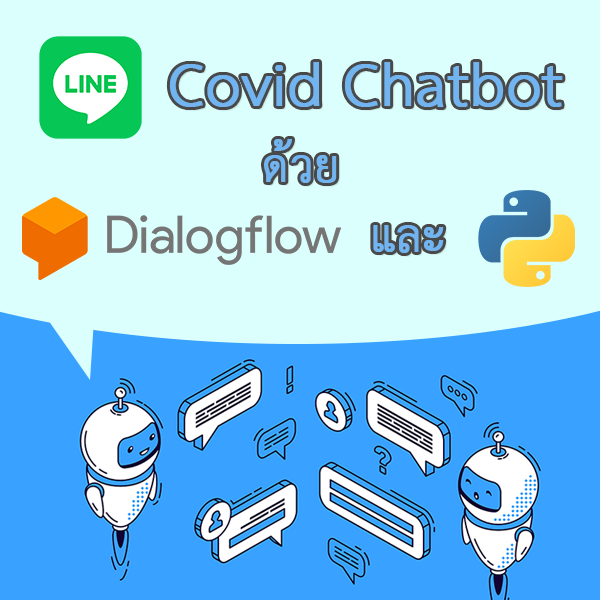
<style>
.page{position:relative;width:600px;height:600px;background:#dafffc}
.page>*{position:absolute;margin:0}
.t1{font:84.7px "THSarabunNew";color:#72b4f0;font-weight:bold}
.t2{font:63.5px "THSarabunNew";color:#72b4f0;font-weight:bold}
</style>
<div class="page">
<p class="t1" style="left:169px;top:62px;width:394px;height:45px">Covid Chatbot</p>
<p class="t2" style="left:264px;top:139px;width:73px;height:44px">ด้วย</p>
<p class="t2" style="left:373px;top:225px;width:71px;height:28px">และ</p>
</div>
